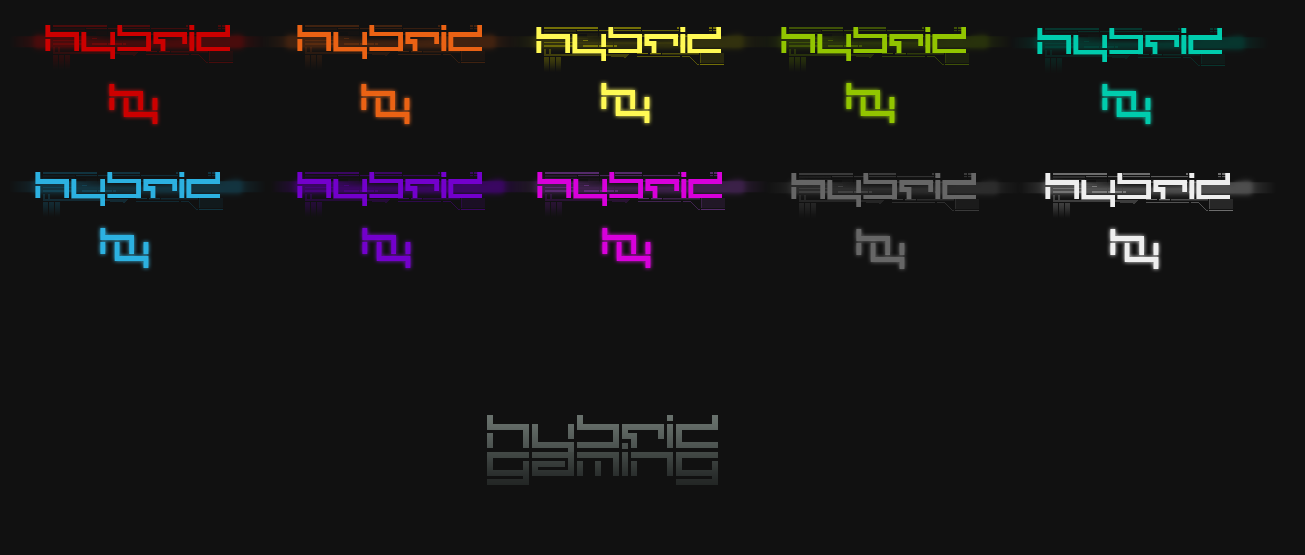
<style>
.page{position:relative;width:1305px;height:555px;background:#111111}
.page>*{position:absolute;margin:0}
.t1{font:48px "Depthcorepublic";color:#cc0000}
.t2{font:48px "Depthcorepublic";color:#ea6214}
.t3{font:48px "Depthcorepublic";color:#fff954}
.t4{font:48px "Depthcorepublic";color:#92c500}
.t5{font:48px "Depthcorepublic";color:#00ccad}
.t6{font:48px "Depthcorepublic";color:#2cb1e1}
.t7{font:48px "Depthcorepublic";color:#7300cc}
.t8{font:48px "Depthcorepublic";color:#d800db}
.t9{font:48px "Depthcorepublic";color:#666666}
.t10{font:48px "Depthcorepublic";color:#eeeeee}
.t11{font:60px "Depthcorepublic";color:#5a625e}
.t12{font:60px "Depthcorepublic";color:#353a38}
</style>
<div class="page">
<p class="t1" style="left:45px;top:25px;width:185px;height:34px">hybrid</p>
<p class="t2" style="left:297px;top:25px;width:185px;height:34px">hybrid</p>
<p class="t3" style="left:536px;top:27px;width:185px;height:34px">hybrid</p>
<p class="t4" style="left:781px;top:27px;width:185px;height:34px">hybrid</p>
<p class="t5" style="left:1037px;top:28px;width:185px;height:34px">hybrid</p>
<p class="t1" style="left:109px;top:84px;width:34px;height:26px">h</p>
<p class="t2" style="left:361px;top:84px;width:34px;height:26px">h</p>
<p class="t3" style="left:601px;top:83px;width:34px;height:26px">h</p>
<p class="t4" style="left:846px;top:83px;width:34px;height:26px">h</p>
<p class="t5" style="left:1102px;top:84px;width:34px;height:26px">h</p>
<p class="t1" style="left:123px;top:98px;width:35px;height:26px;rotate:180deg">h</p>
<p class="t2" style="left:375px;top:98px;width:35px;height:26px;rotate:180deg">h</p>
<p class="t3" style="left:615px;top:97px;width:35px;height:26px;rotate:180deg">h</p>
<p class="t4" style="left:860px;top:97px;width:35px;height:26px;rotate:180deg">h</p>
<p class="t5" style="left:1116px;top:98px;width:35px;height:26px;rotate:180deg">h</p>
<p class="t6" style="left:35px;top:172px;width:185px;height:34px">hybrid</p>
<p class="t7" style="left:297px;top:172px;width:185px;height:34px">hybrid</p>
<p class="t8" style="left:537px;top:172px;width:185px;height:34px">hybrid</p>
<p class="t9" style="left:791px;top:173px;width:185px;height:34px">hybrid</p>
<p class="t10" style="left:1045px;top:173px;width:185px;height:34px">hybrid</p>
<p class="t6" style="left:100px;top:228px;width:34px;height:26px">h</p>
<p class="t7" style="left:362px;top:228px;width:34px;height:26px">h</p>
<p class="t8" style="left:602px;top:228px;width:34px;height:26px">h</p>
<p class="t9" style="left:856px;top:229px;width:34px;height:26px">h</p>
<p class="t10" style="left:1110px;top:229px;width:34px;height:26px">h</p>
<p class="t6" style="left:114px;top:242px;width:35px;height:26px;rotate:180deg">h</p>
<p class="t7" style="left:376px;top:242px;width:35px;height:26px;rotate:180deg">h</p>
<p class="t8" style="left:616px;top:242px;width:35px;height:26px;rotate:180deg">h</p>
<p class="t9" style="left:870px;top:243px;width:35px;height:26px;rotate:180deg">h</p>
<p class="t10" style="left:1124px;top:243px;width:35px;height:26px;rotate:180deg">h</p>
<p class="t11" style="left:487px;top:415px;width:231px;height:42px">hybrid</p>
<p class="t12" style="left:487px;top:443px;width:231px;height:42px">gaming</p>
</div>
